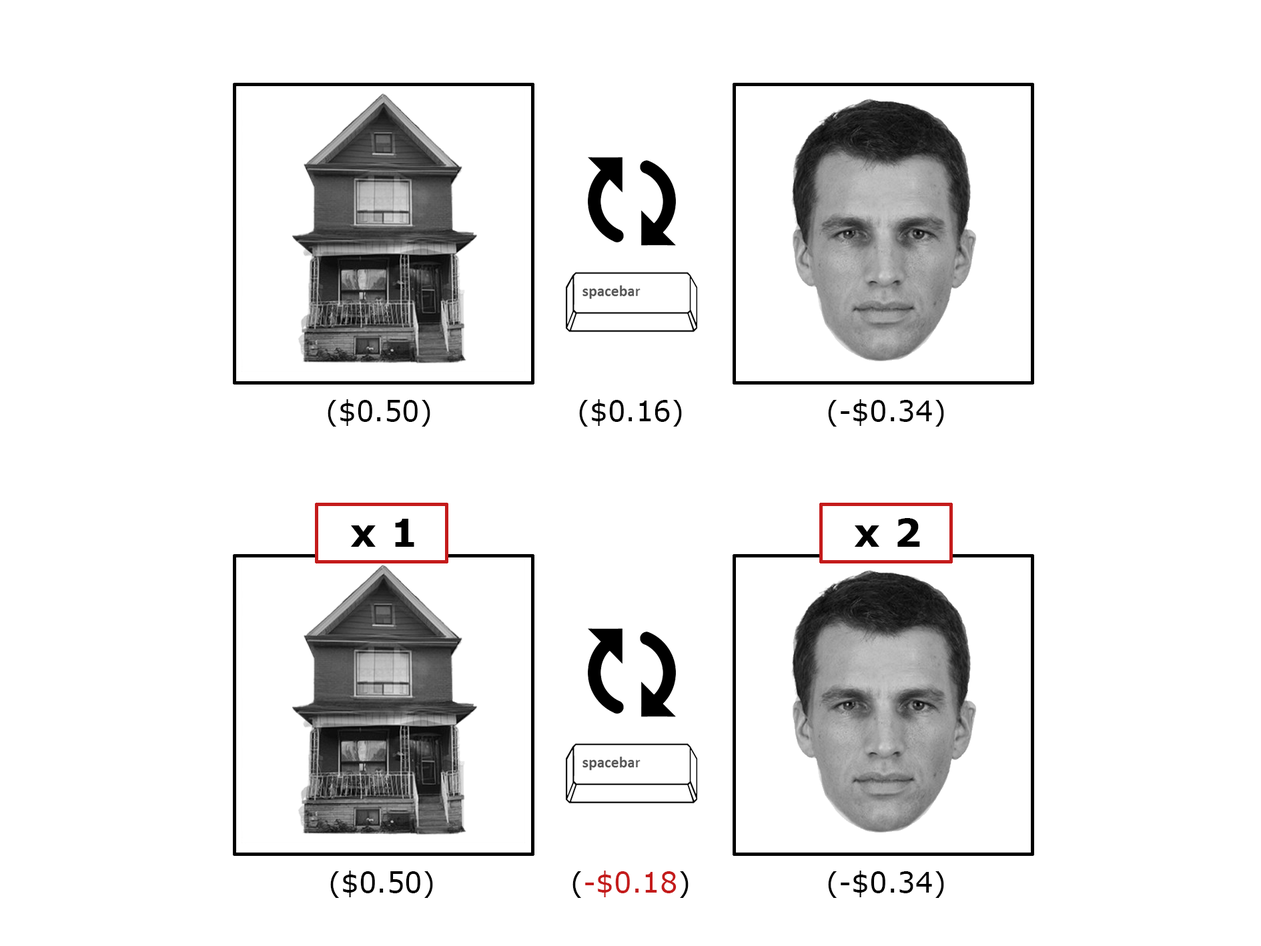
<style>
.page{position:relative;width:1261px;height:946px;background:#ffffff}
.page>*{position:absolute;margin:0}
.t1{font:27.8px "Verdana";letter-spacing:0.005em;color:#000000}
.t2{font:38.9px "Verdana-Bold";letter-spacing:0.005em;color:#000000}
.t3{font:27.8px "Verdana";letter-spacing:0.005em;color:#c41b1b}
</style>
<div class="page">
<p class="t1" style="left:328px;top:399px;width:102px;height:27px">($0.50)</p>
<p class="t1" style="left:579px;top:399px;width:103px;height:27px">($0.16)</p>
<p class="t1" style="left:828px;top:399px;width:116px;height:27px">(-$0.34)</p>
<p class="t2" style="left:350px;top:518px;width:64px;height:28px">x 1</p>
<p class="t2" style="left:854px;top:518px;width:66px;height:28px">x 2</p>
<p class="t1" style="left:330px;top:870px;width:103px;height:27px">($0.50)</p>
<p class="t3" style="left:573px;top:870px;width:116px;height:27px"><span class="t1">(</span>-$0.18<span class="t1">)</span></p>
<p class="t1" style="left:828px;top:870px;width:116px;height:27px">(-$0.34)</p>
</div>
